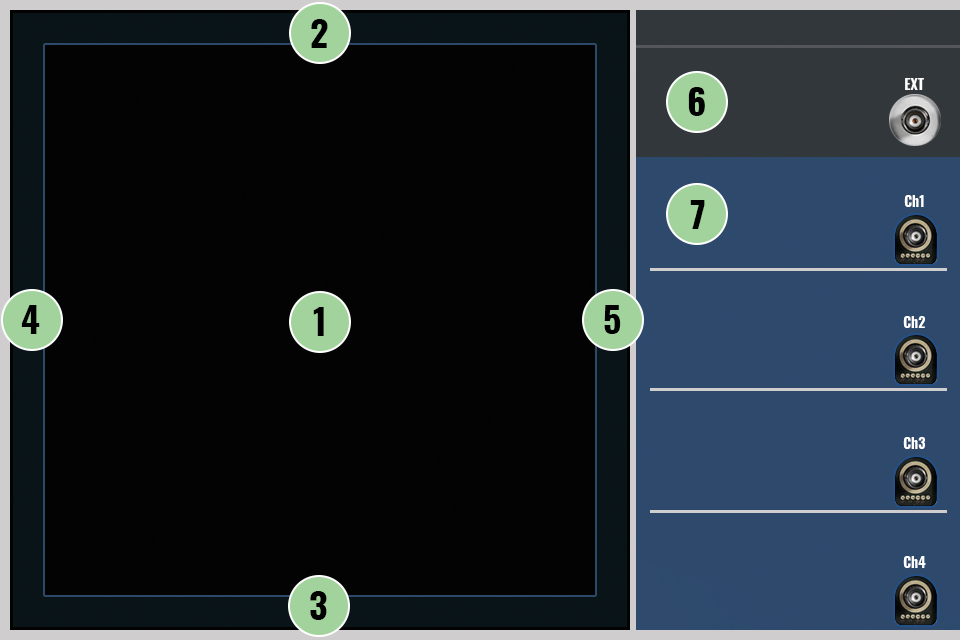
<style>
.page{position:relative;width:960px;height:640px;background:#030303}
.page>*{position:absolute;margin:0}
.t1{font:36px "Oswald-Bold";color:#000000}
.t2{font:14px "Oswald-Bold";color:#ffffff}
</style>
<div class="page">
<p class="t1" style="left:311px;top:19px;width:17px;height:29px">2</p>
<p class="t2" style="left:905px;top:78px;width:19px;height:12px">EXT</p>
<p class="t1" style="left:688px;top:87px;width:17px;height:29px">6</p>
<p class="t2" style="left:904px;top:195px;width:20px;height:12px">Ch1</p>
<p class="t1" style="left:690px;top:200px;width:15px;height:29px">7</p>
<p class="t1" style="left:21px;top:305px;width:19px;height:29px">4</p>
<p class="t1" style="left:604px;top:305px;width:17px;height:29px">5</p>
<p class="t1" style="left:313px;top:307px;width:11px;height:29px">1</p>
<p class="t2" style="left:903px;top:316px;width:22px;height:12px">Ch2</p>
<p class="t2" style="left:903px;top:437px;width:22px;height:12px">Ch3</p>
<p class="t2" style="left:903px;top:556px;width:23px;height:12px">Ch4</p>
<p class="t1" style="left:310px;top:591px;width:17px;height:29px">3</p>
</div>
